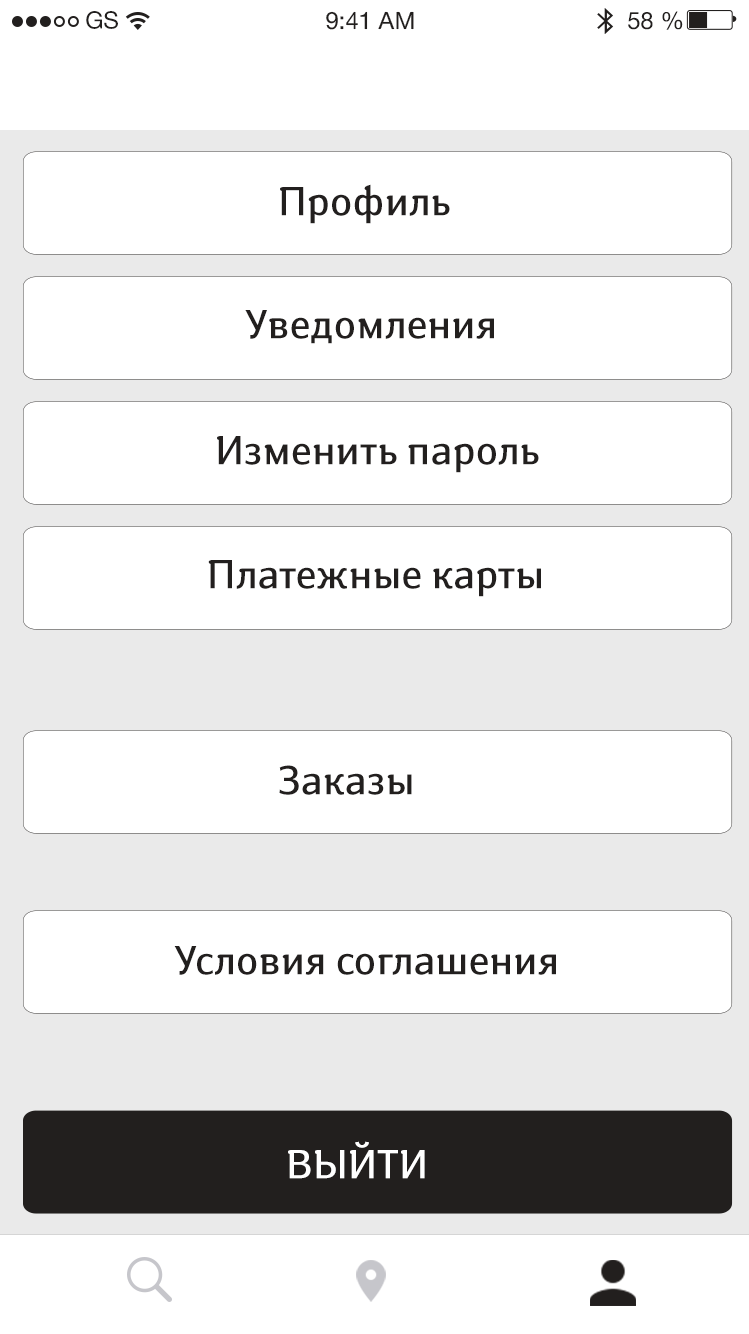
<style>
.page{position:relative;width:749px;height:1334px;background:#ffffff}
.page>*{position:absolute;margin:0}
.t1{font:24px "HelveticaNeueCyr-Roman";color:#221f1e}
.t2{font:40px "SusanBook-Regular";color:#221f1e}
.t3{font:40px "SusanBook-Regular";color:#ffffff}
</style>
<div class="page">
<p class="t1" style="left:86px;top:11px;width:32px;height:18px">GS</p>
<p class="t1" style="left:326px;top:11px;width:88px;height:19px">9:41 AM</p>
<p class="t1" style="left:628px;top:11px;width:55px;height:19px">58 %</p>
<p class="t2" style="left:280px;top:184px;width:170px;height:40px">Профиль</p>
<p class="t2" style="left:245px;top:310px;width:249px;height:34px">Уведомления</p>
<p class="t2" style="left:217px;top:436px;width:322px;height:37px">Изменить пароль</p>
<p class="t2" style="left:208px;top:560px;width:333px;height:37px">Платежные карты</p>
<p class="t2" style="left:279px;top:765px;width:133px;height:30px">Заказы</p>
<p class="t2" style="left:174px;top:946px;width:382px;height:29px">Условия соглашения</p>
<p class="t3" style="left:288px;top:1141px;width:137px;height:38px">ВЫЙТИ</p>
</div>
